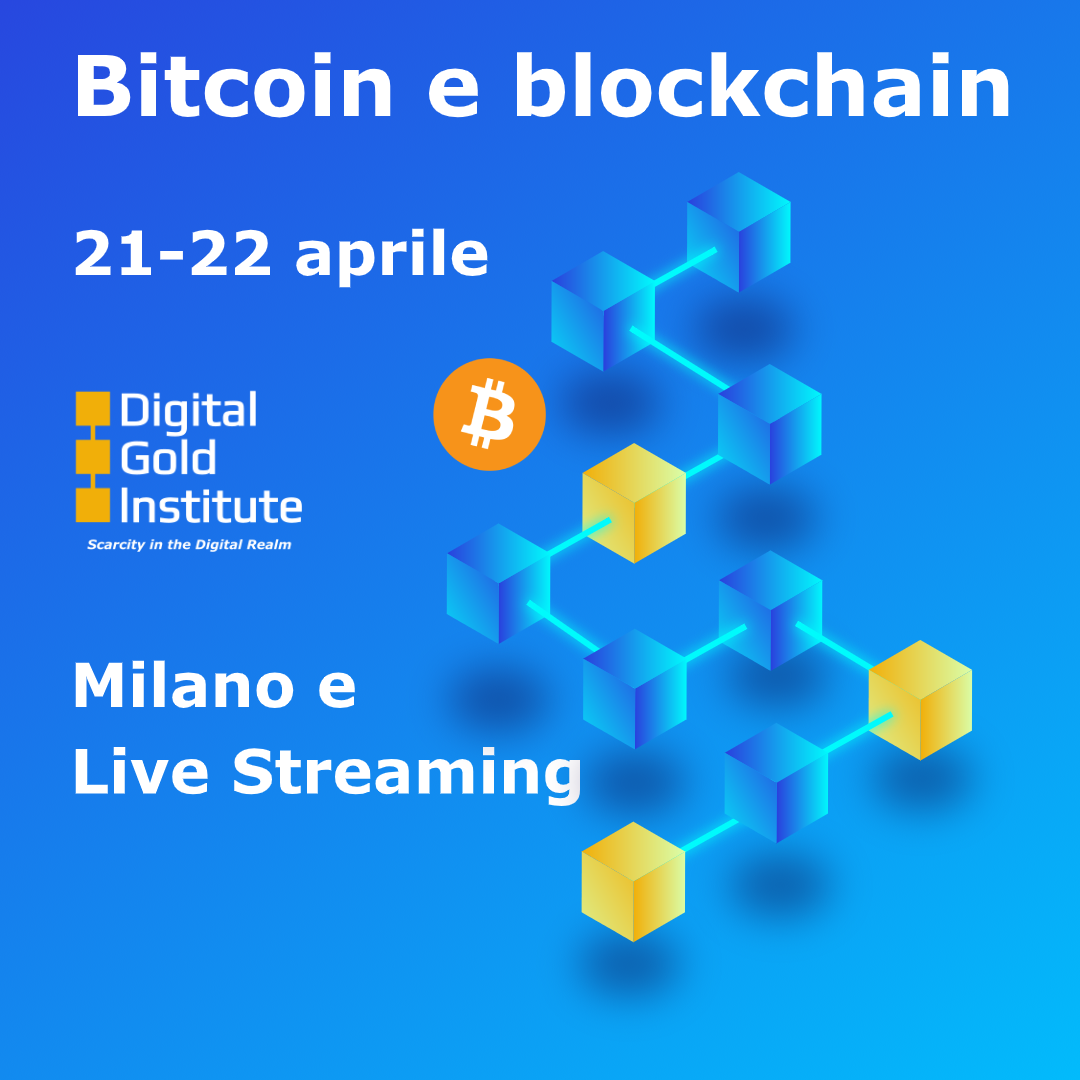
<style>
.page{position:relative;width:1080px;height:1080px}
.page>*{position:absolute;margin:0}
.t1{font:84px "Verdana-Bold";color:#ffffff}
.t2{font:61px "Verdana-Bold";color:#ffffff}
</style>
<div class="page">
<p class="t1" style="left:77px;top:52px;width:932px;height:66px">Bitcoin e blockchain</p>
<p class="t2" style="left:75px;top:228px;width:506px;height:578px">21-22 aprile<br><br><br><br><br><br><br><br><br><br>Milano e<br><br>Live Streaming</p>
</div>
